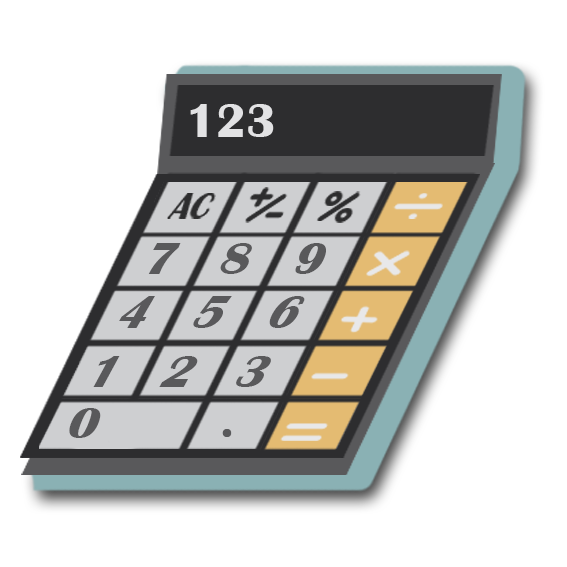
<style>
.page{position:relative;width:567px;height:567px;background:#ffffff}
.page>*{position:absolute;margin:0}
.t1{font:49.1px "BritannicBold";color:#e2e2e4}
.t2{font:50.3px "BritannicBold";color:#59595b}
.t3{font:55.4px "BritannicBold";color:#59595b;scale:0.89 1}
.t4{font:53px "BritannicBold";color:#59595b;scale:0.93 1}
.t5{font:48.7px "BritannicBold";color:#59595b}
.t6{font:49.1px "BritannicBold";color:#59595b}
</style>
<div class="page">
<p class="t1" style="left:190px;top:104px;width:84px;height:33px">123</p>
<p class="t2" style="left:148px;top:243px;width:178px;height:31px">7   8   9</p>
<p class="t3" style="left:119px;top:296px;width:186px;height:32px">4   5   6</p>
<p class="t4" style="left:93px;top:356px;width:178px;height:31px">1   2   3</p>
<p class="t5" style="left:69px;top:408px;width:32px;height:30px">0</p>
<p class="t6" style="left:222px;top:429px;width:10px;height:8px">.</p>
</div>
